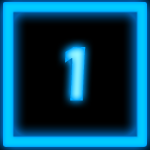
<style>
.page{position:relative;width:150px;height:150px;background:#000000}
.page>*{position:absolute;margin:0}
.t1{font:80px "ErasITC-Demi";letter-spacing:0.025em}
</style>
<div class="page">
<p class="t1" style="left:65px;top:47px;width:21px;height:54px">1</p>
</div>
